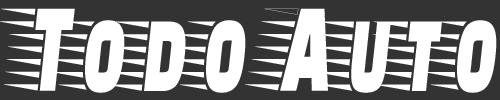
<style>
.page{position:relative;width:500px;height:100px;background:#333333}
.page>*{position:absolute;margin:0}
.t1{font:130.9px "FasterOne-Regular";color:#ffffff;scale:0.61 1}
</style>
<div class="page">
<p class="t1" style="left:0px;top:8px;width:497px;height:85px">Todo Auto</p>
</div>
